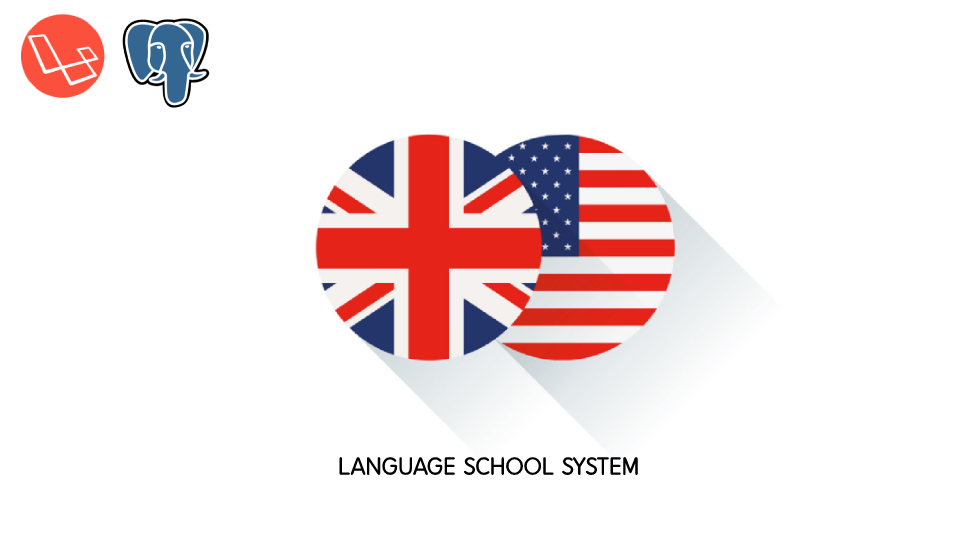
<style>
.page{position:relative;width:976px;height:549px;background:#ffffff}
.page>*{position:absolute;margin:0}
.t1{font:24px "DXLBaB-KSCpc-EUC-H";color:#000000}
</style>
<div class="page">
<p class="t1" style="left:339px;top:456px;width:299px;height:20px">LANGUAGE SCHOOL SYSTEM</p>
</div>
